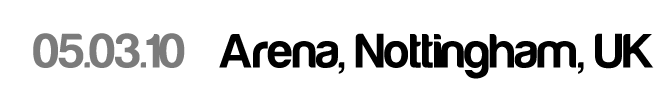
<style>
.page{position:relative;width:660px;height:100px;background:#ffffff}
.page>*{position:absolute;margin:0}
.t1{font:50px "Harabara-Bold";color:#000000}
.t2{font:50px "Harabara-Bold";color:#7b7b7b}
</style>
<div class="page">
<p class="t1" style="left:33px;top:33px;width:621px;height:46px"><span class="t2">05.03.10</span>   Arena, Nottingham, UK</p>
</div>
